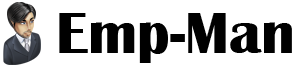
<style>
.page{position:relative;width:296px;height:67px;background:#ffffff}
.page>*{position:absolute;margin:0}
.t1{font:60px "BritannicBold";color:#000000}
</style>
<div class="page">
<p class="t1" style="left:59px;top:13px;width:233px;height:50px">Emp-Man</p>
</div>
